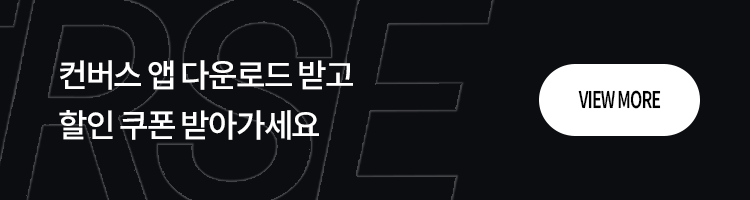
<style>
.page{position:relative;width:750px;height:200px;background:#0c0d11}
.page>*{position:absolute;margin:0}
.t1{font:32px/50px "NotoSansKR-Medium";letter-spacing:-0.05em;color:#ffffff;text-transform:uppercase}
.t2{font:23px "NotoSansKR-SemiBold";letter-spacing:-0.05em;color:#000000;text-transform:uppercase;scale:0.7 1}
</style>
<div class="page">
<p class="t1" style="left:59px;top:60px;width:294px;height:80px">컨버스 앱 다운로드 받고<br>할인 쿠폰 받아가세요</p>
<p class="t2" style="left:578px;top:90px;width:83px;height:19px">view more</p>
</div>
